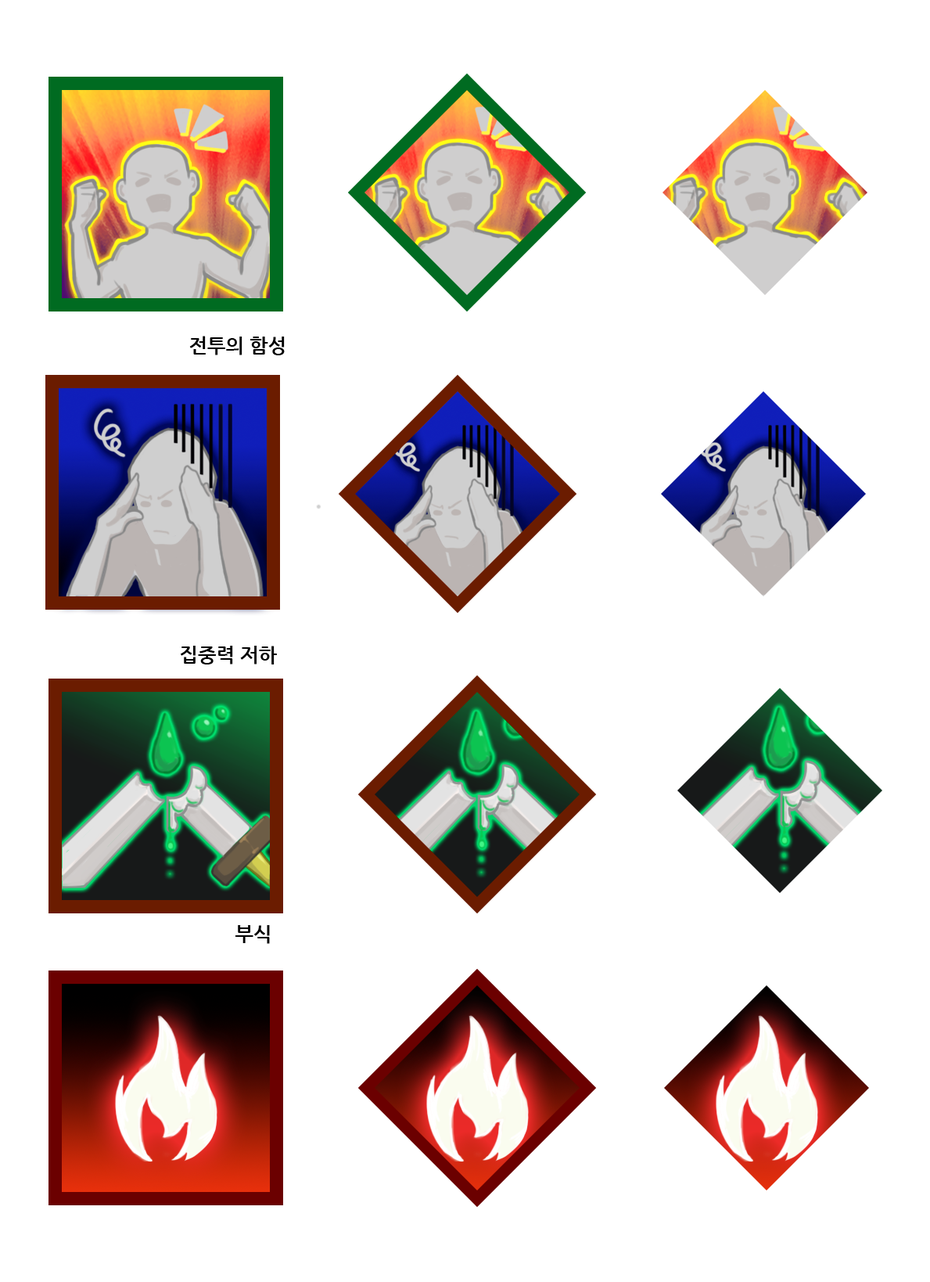
<style>
.page{position:relative;width:930px;height:1282px;background:#ffffff}
.page>*{position:absolute;margin:0}
.t1{font:19.6px "NanumGothicBold";color:#000000}
</style>
<div class="page">
<p class="t1" style="left:189px;top:336px;width:96px;height:19px">전투의 함성</p>
<p class="t1" style="left:181px;top:646px;width:96px;height:18px">집중력 저하</p>
<p class="t1" style="left:236px;top:925px;width:34px;height:19px">부식</p>
</div>
